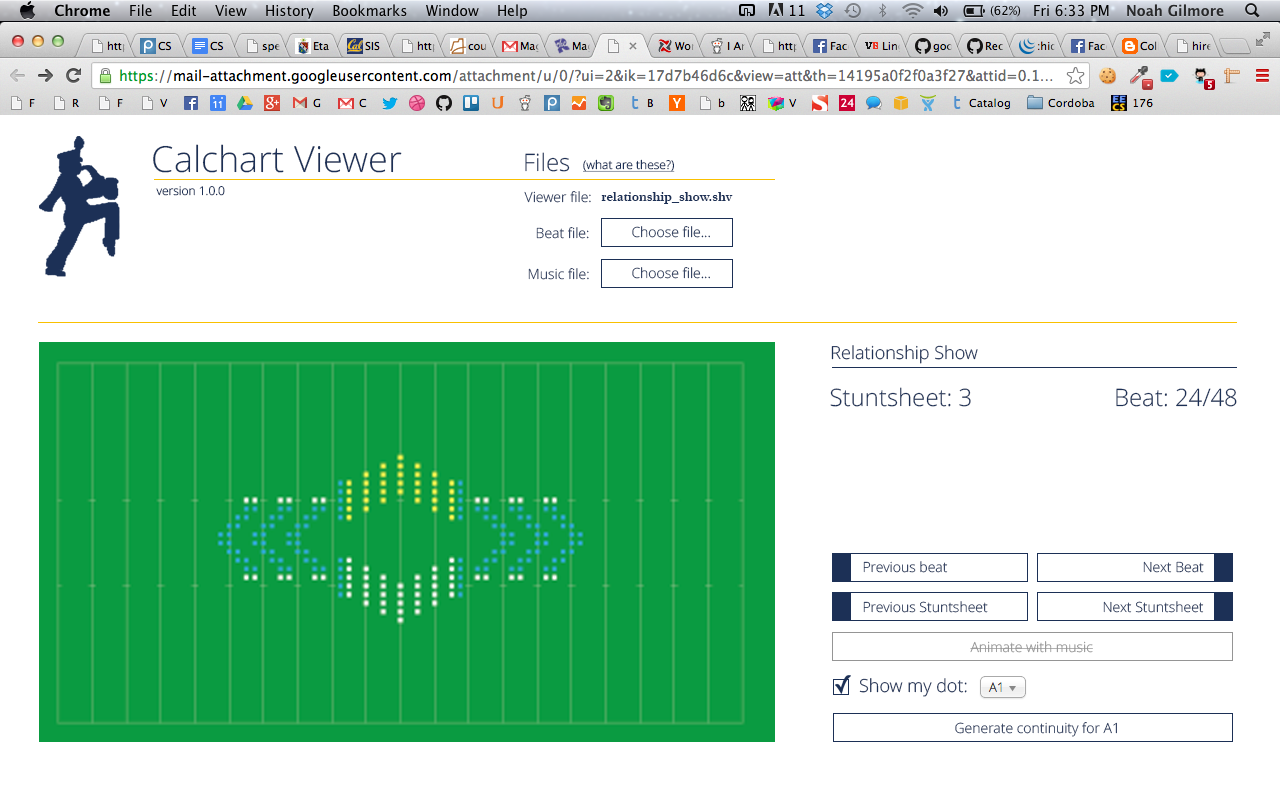
<style>
.page{position:relative;width:1280px;height:800px;background:#ffffff}
.page>*{position:absolute;margin:0}
.t1{font:36px "OpenSans-Light";color:#1c3056}
.t2{font:24px "OpenSans-Light";color:#1c3056}
.t3{font:12px "OpenSans-Light";color:#1c3056;text-decoration:underline}
.t4{font:12px "OpenSans-Light";color:#1c3056}
.t5{font:14px "OpenSans-Light"}
.t6{font:14px "Garamond-Bold";color:#1c3056}
.t7{font:14px "OpenSans-Light";color:#1c3056}
.t8{font:18px "OpenSans-Light";color:#1c3056}
.t9{font:14px "OpenSans-Light";color:#959595}
</style>
<div class="page">
<p class="t1" style="left:153px;top:144px;width:249px;height:29px">Calchart Viewer</p>
<p class="t2" style="left:525px;top:152px;width:45px;height:20px">Files</p>
<p class="t3" style="left:583px;top:159px;width:92px;height:13px">(what are these?)</p>
<p class="t4" style="left:156px;top:186px;width:69px;height:10px">version 1.0.0</p>
<p class="t5" style="left:524px;top:191px;width:67px;height:12px">Viewer file:</p>
<p class="t6" style="left:601px;top:192px;width:132px;height:12px">relationship_show.shv</p>
<p class="t5" style="left:536px;top:227px;width:53px;height:12px">Beat file:</p>
<p class="t7" style="left:632px;top:226px;width:78px;height:12px">Choose file...</p>
<p class="t7" style="left:528px;top:268px;width:61px;height:12px">Music file:</p>
<p class="t7" style="left:632px;top:267px;width:78px;height:12px">Choose file...</p>
<p class="t8" style="left:831px;top:345px;width:147px;height:19px">Relationship Show</p>
<p class="t2" style="left:830px;top:387px;width:141px;height:20px">Stuntsheet: 3</p>
<p class="t2" style="left:1116px;top:388px;width:121px;height:19px">Beat: 24/48</p>
<p class="t5" style="left:863px;top:561px;width:85px;height:12px">Previous beat</p>
<p class="t5" style="left:1143px;top:561px;width:61px;height:12px">Next Beat</p>
<p class="t5" style="left:863px;top:601px;width:125px;height:12px">Previous Stuntsheet</p>
<p class="t5" style="left:1103px;top:601px;width:101px;height:12px">Next Stuntsheet</p>
<p class="t9" style="left:970px;top:641px;width:123px;height:12px">Animate with music</p>
<p class="t8" style="left:859px;top:678px;width:108px;height:19px">Show my dot:</p>
<p class="t5" style="left:955px;top:722px;width:162px;height:15px">Generate continuity for A1</p>
</div>
